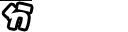
<style>
.page{position:relative;width:128px;height:32px;background:#ffffff}
.page>*{position:absolute;margin:0}
.t1{font:28px "DFPHaiBaoW12";letter-spacing:0.2em;color:#ffffff}
</style>
<div class="page">
<p class="t1" style="left:4px;top:4px;width:27px;height:25px">分</p>
</div>
